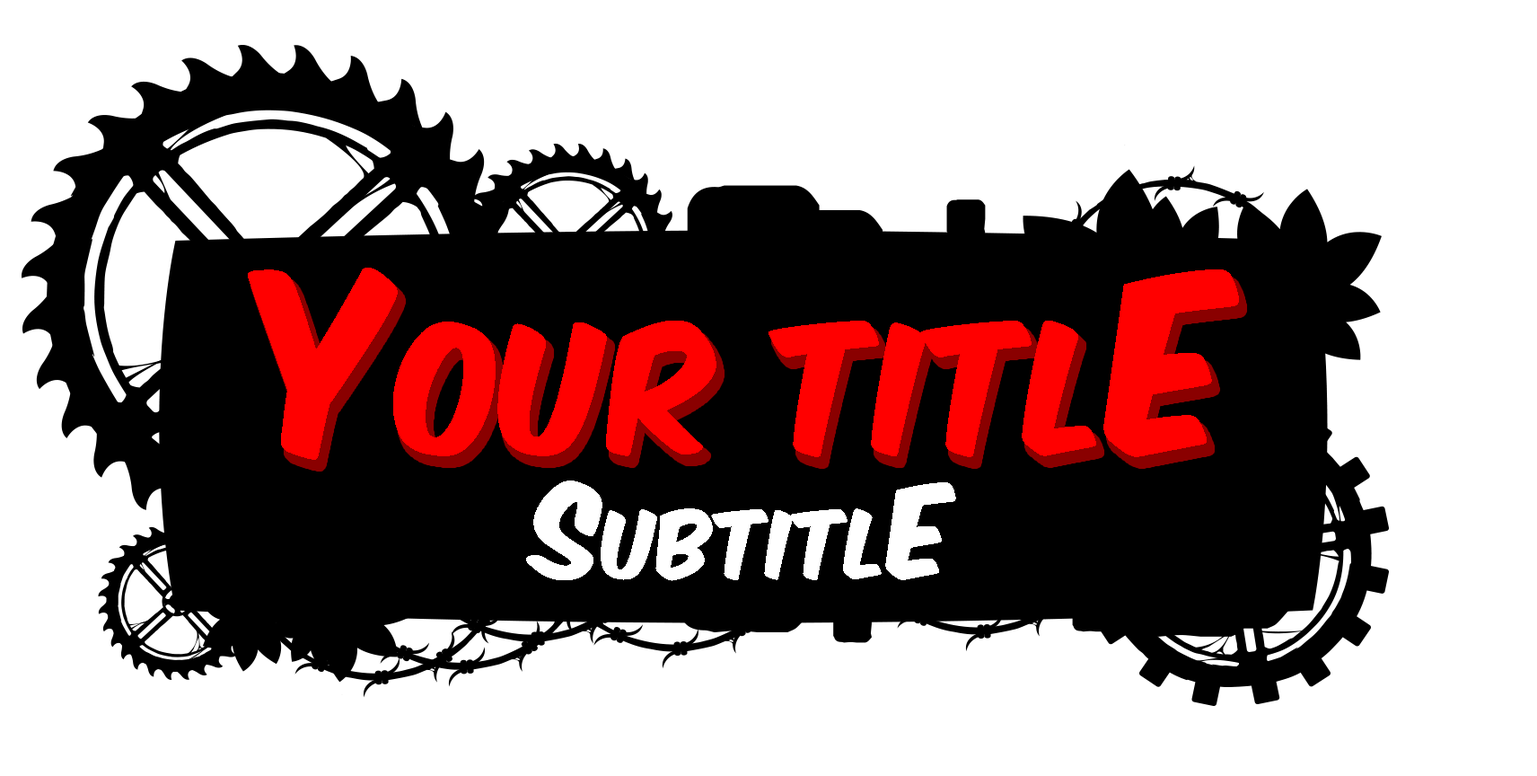
<style>
.page{position:relative;width:1537px;height:776px;background:#ffffff}
.page>*{position:absolute;margin:0}
.t1{font:152.8px "KomikaAxis";color:#ff0000}
.t2{font:211.6px "KomikaAxis";color:#ff0000}
.t3{font:79.7px "KomikaAxis";color:#ffffff}
.t4{font:110.3px "KomikaAxis";color:#ffffff}
</style>
<div class="page">
<p class="t1" style="left:248px;top:268px;width:991px;height:192px"><span class="t2">Y</span>OUR TITL<span class="t2">E</span></p>
<p class="t3" style="left:526px;top:480px;width:430px;height:101px"><span class="t4">S</span>UBTITL<span class="t4">E</span></p>
</div>
